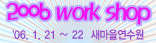
<style>
.page{position:relative;width:156px;height:43px}
.page>*{position:absolute;margin:0}
.t1{font:25px "MagicR-HM";letter-spacing:-0.1em;color:#f212ef;scale:0.95 1}
.t2{font:11px "KoreanGD-Extra-KSCpc-EUC-H";letter-spacing:-0.1em;color:#9648c8;scale:0.9 1}
</style>
<div class="page">
<p class="t1" style="left:7px;top:3px;width:144px;height:22px">2006 work shop</p>
<p class="t2" style="left:12px;top:29px;width:132px;height:11px">'06. 1. 21 ~ 22  새마을연수원</p>
</div>
